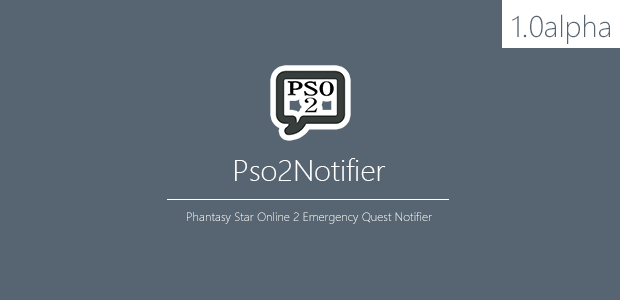
<style>
.page{position:relative;width:620px;height:300px;background:#576573}
.page>*{position:absolute;margin:0}
.t1{font:30px "SegoeUI-Light";color:#576573}
.t2{font:30px "SegoeUI-Light";color:#ffffff}
.t3{font:12px "SegoeUI-Light";color:#ffffff}
</style>
<div class="page">
<p class="t1" style="left:512px;top:14px;width:98px;height:30px">1.0alpha</p>
<p class="t2" style="left:235px;top:158px;width:151px;height:23px">Pso2Notifier</p>
<p class="t3" style="left:187px;top:212px;width:245px;height:12px">Phantasy Star Online 2 Emergency Quest Notifier</p>
</div>
